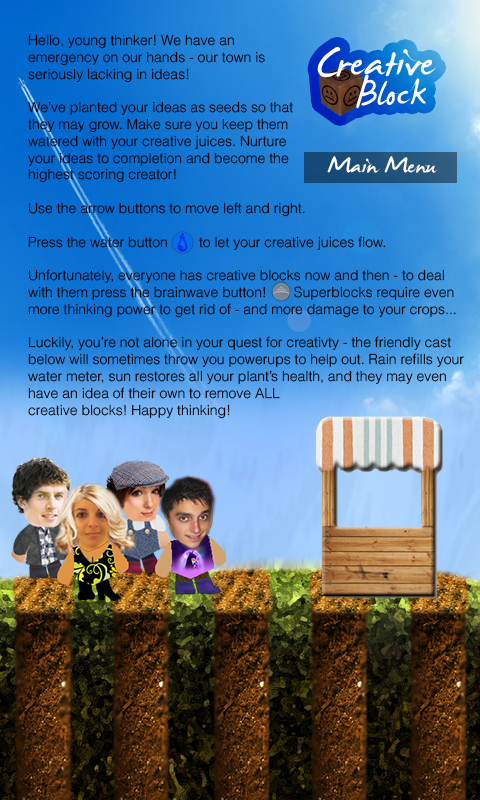
<style>
.page{position:relative;width:480px;height:800px}
.page>*{position:absolute;margin:0}
.t1{font:14px "Helvetica-Light";color:#000000}
.t2{font:67.8px "JamesFajardo";color:#ffffff}
.t3{font:59.2px "JamesFajardo";color:#ffffff}
.t4{font:36px "JamesFajardo";color:#ffffff}
</style>
<div class="page">
<p class="t1" style="left:28px;top:34px;width:436px;height:385px">Hello, young thinker! We have an<br>emergency on our hands - our town is<br>seriously lacking in ideas!<br><br>We’ve planted your ideas as seeds so that<br>they may grow. Make sure you keep them<br>watered with your creative juices. Nurture<br>your ideas to completion and become the<br>highest scoring creator!<br><br>Use the arrow buttons to move left and right. <br><br>Press the water button        to let your creative juices flow. <br><br>Unfortunately, everyone has creative blocks now and then - to deal<br>with them press the brainwave button!       Superblocks require even<br>more thinking power to get rid of - and more damage to your crops...<br><br>Luckily, you’re not alone in your quest for creativty - the friendly cast<br>below will sometimes throw you powerups to help out. Rain refills your<br>water meter, sun restores all your plant’s health, and they may even<br>have an idea of their own to remove ALL<br>creative blocks! Happy thinking!</p>
<p class="t2" style="left:317px;top:47px;width:120px;height:31px">Creative</p>
<p class="t3" style="left:356px;top:74px;width:70px;height:35px">Block</p>
<p class="t4" style="left:327px;top:156px;width:110px;height:17px">Main Menu</p>
</div>
